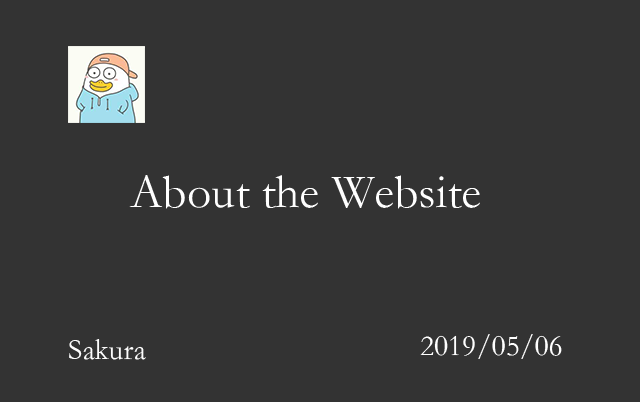
<style>
.page{position:relative;width:640px;height:402px;background:#333333}
.page>*{position:absolute;margin:0}
.t1{font:48px "STKaiti";color:#ffffff}
.t2{font:30px "STKaiti";color:#fdfdfd}
.t3{font:30px "STKaiti";color:#ffffff}
</style>
<div class="page">
<p class="t1" style="left:129px;top:175px;width:351px;height:34px">About the Website</p>
<p class="t2" style="left:69px;top:339px;width:77px;height:21px">Sakura</p>
<p class="t3" style="left:420px;top:334px;width:142px;height:25px">2019/05/06</p>
</div>
